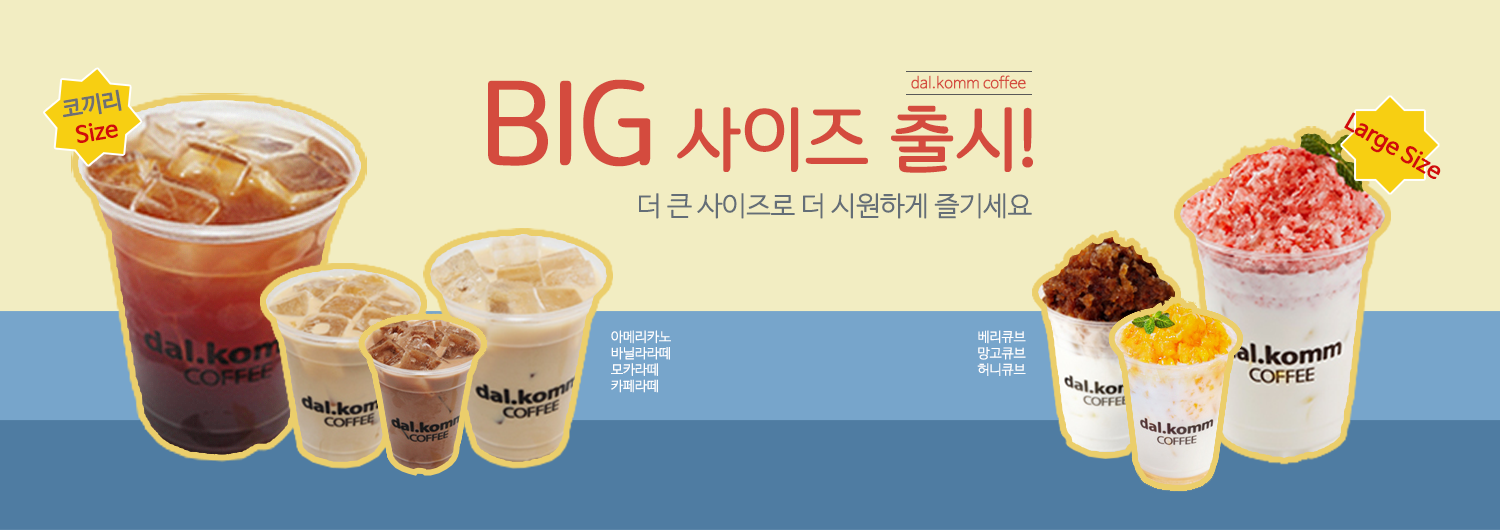
<style>
.page{position:relative;width:1500px;height:530px;background:#f2edc2}
.page>*{position:absolute;margin:0}
.t1{font:15.2px "NanumBarunGothicUltraLight";letter-spacing:-0.025em;color:#d44b3e;font-weight:bold}
.t2{font:22.3px/27.5px "NanumBarunGothic";letter-spacing:-0.025em;color:#d10b0b;font-weight:bold}
.t3{font:22.3px/27.5px "NanumBarunGothic";letter-spacing:-0.025em;color:#6e7072;font-weight:bold}
.t4{font:69.6px "OSeongandHanEum-Regular";letter-spacing:-0.025em;color:#d44b3e;font-weight:bold}
.t5{font:107.1px "OSeongandHanEum-Regular";letter-spacing:-0.025em;color:#d44b3e;font-weight:bold}
.t6{font:22.3px "NanumBarunGothic";letter-spacing:-0.025em;color:#d10b0b;font-weight:bold}
.t7{font:26.8px "NanumBarunGothicUltraLight";letter-spacing:-0.025em;color:#646e77;font-weight:bold}
.t8{font:13.3px/16.4px "NanumBarunGothicUltraLight";letter-spacing:-0.025em;color:#ffffff;font-weight:bold}
</style>
<div class="page">
<p class="t1" style="left:911px;top:75px;width:115px;height:14px">dal.komm coffee</p>
<p class="t2" style="left:63px;top:89px;width:59px;height:54px;text-align:center;rotate:-10deg"><span class="t3">코끼리<br></span>Size</p>
<p class="t4" style="left:488px;top:79px;width:545px;height:94px"><span class="t5">BIG</span> 사이즈 출시!</p>
<p class="t6" style="left:1344px;top:112px;width:97px;height:67px;rotate:30deg">Large Size</p>
<p class="t7" style="left:639px;top:193px;width:393px;height:26px">더 큰 사이즈로 더 시원하게 즐기세요</p>
<p class="t8" style="left:611px;top:330px;width:60px;height:63px">아메리카노<br>바닐라라떼<br>모카라떼<br>카페라떼</p>
<p class="t8" style="left:977px;top:330px;width:49px;height:46px;text-align:right">베리큐브<br>망고큐브<br>허니큐브</p>
</div>
